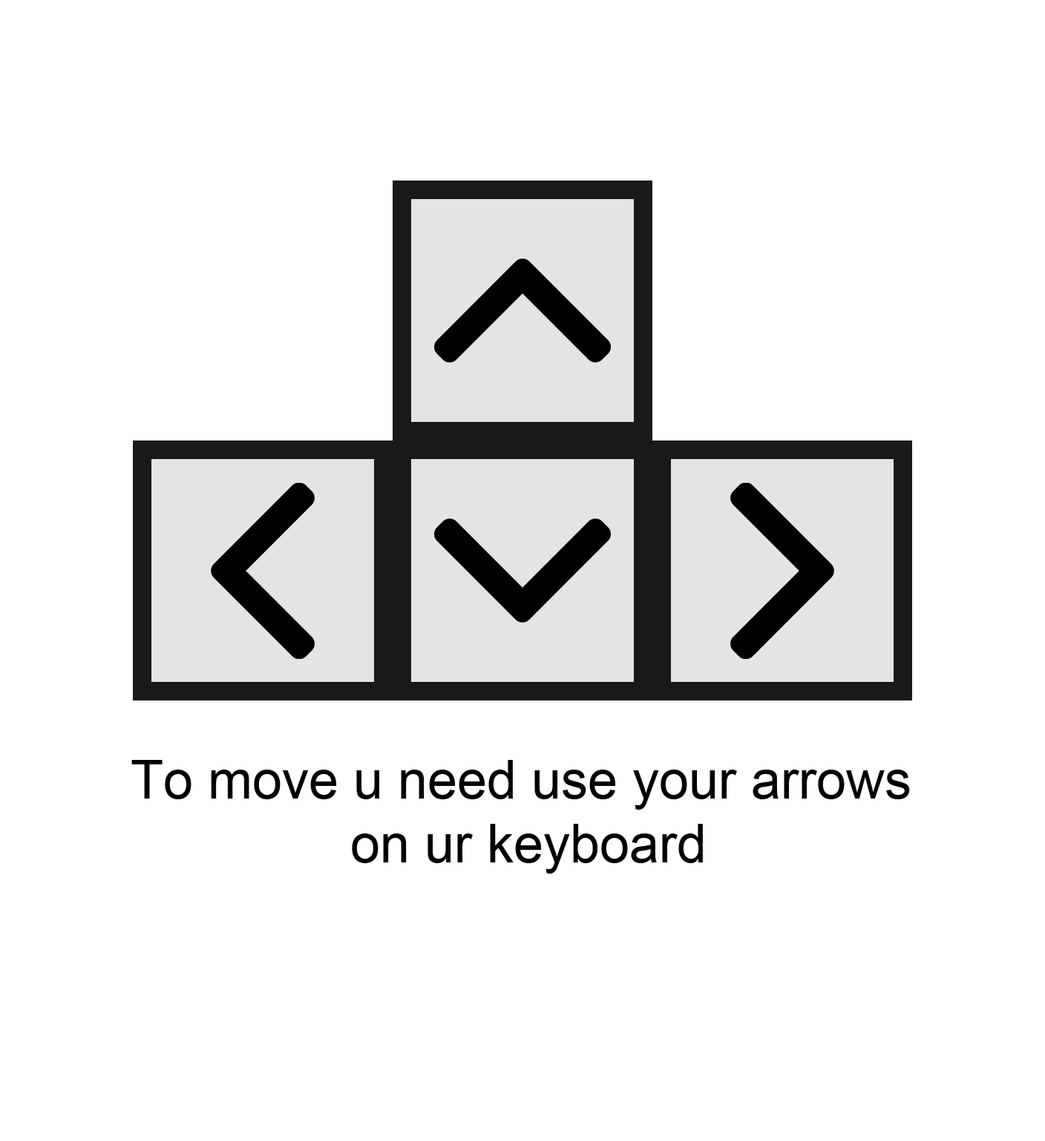
<style>
.page{position:relative;width:1045px;height:1141px;background:#ffffff}
.page>*{position:absolute;margin:0}
.t1{font:53.5px "ArialMT";color:#000000}
</style>
<div class="page">
<p class="t1" style="left:131px;top:760px;width:779px;height:113px;text-align:center">To move u need use your arrows <br>on ur keyboard</p>
</div>
